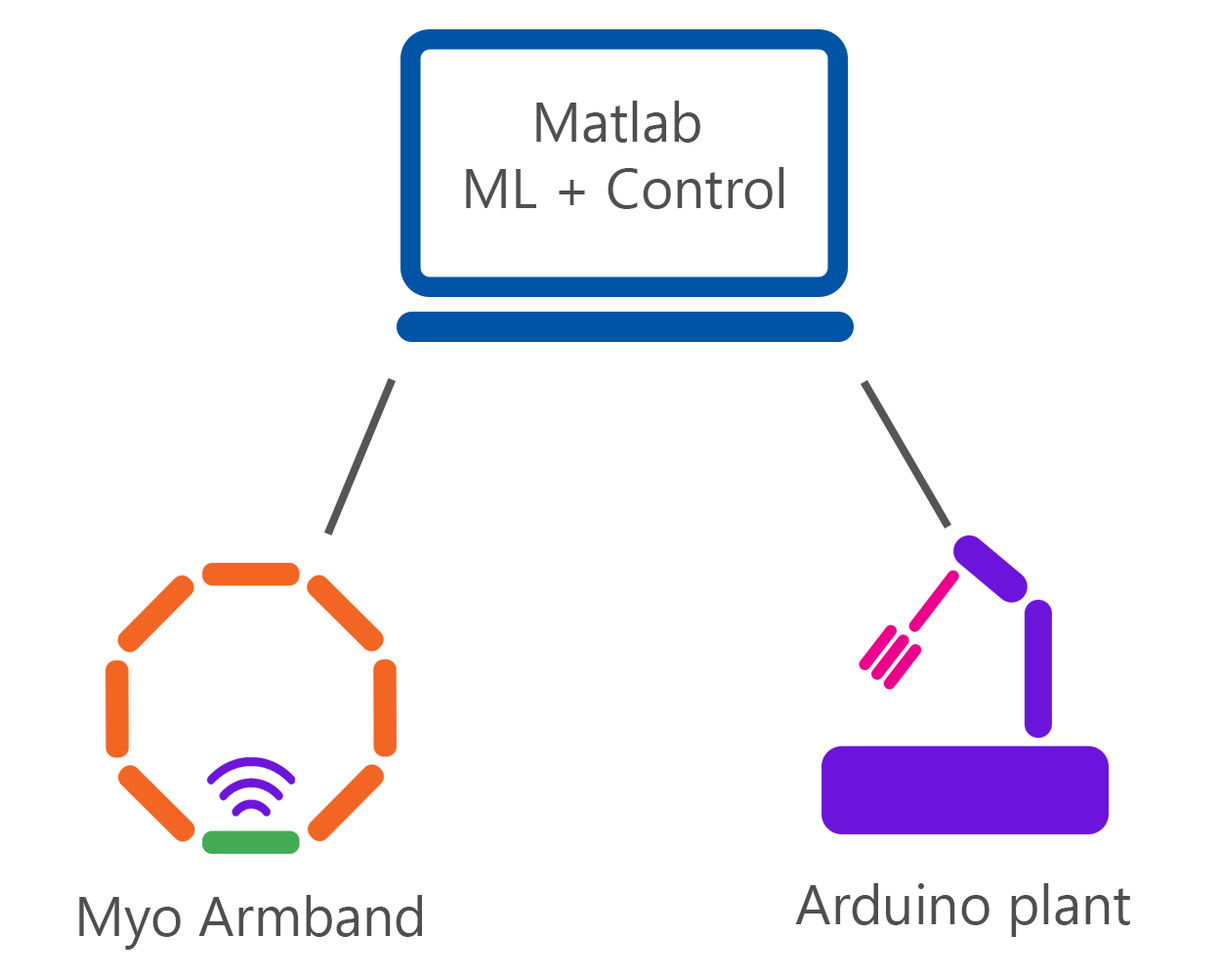
<style>
.page{position:relative;width:1221px;height:977px;background:#ffffff}
.page>*{position:absolute;margin:0}
.t1{font:55.7px "NirmalaUI";color:#504e51}
</style>
<div class="page">
<p class="t1" style="left:466px;top:101px;width:318px;height:108px;text-align:center">Matlab <br>ML + Control</p>
<p class="t1" style="left:795px;top:883px;width:335px;height:54px">Arduino plant</p>
<p class="t1" style="left:79px;top:895px;width:343px;height:54px">Myo Armband</p>
</div>
